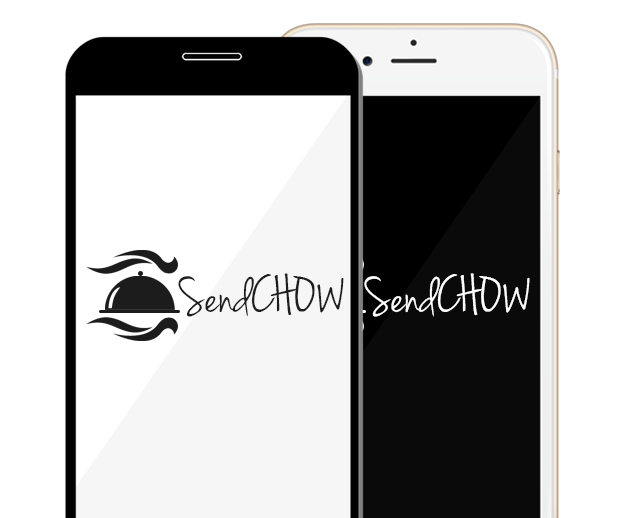
<style>
.page{position:relative;width:627px;height:518px;background:#ffffff}
.page>*{position:absolute;margin:0}
.t1{font:54.3px "JennaSue";color:#1d1d1d;scale:1.03 1}
.t2{font:54.3px "JennaSue";color:#ffffff;scale:1.03 1}
</style>
<div class="page">
<p class="t1" style="left:178px;top:273px;width:166px;height:44px">SendCHOW</p>
<p class="t2" style="left:364px;top:273px;width:166px;height:44px">SendCHOW</p>
</div>
